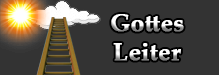
<style>
.page{position:relative;width:219px;height:75px;background:#333333}
.page>*{position:absolute;margin:0}
.t1{font:24px "PalatinoLinotype-Bold";font-weight:bold}
</style>
<div class="page">
<p class="t1" style="left:111px;top:14px;width:73px;height:47px;text-align:center">Gottes<br>Leiter</p>
</div>
